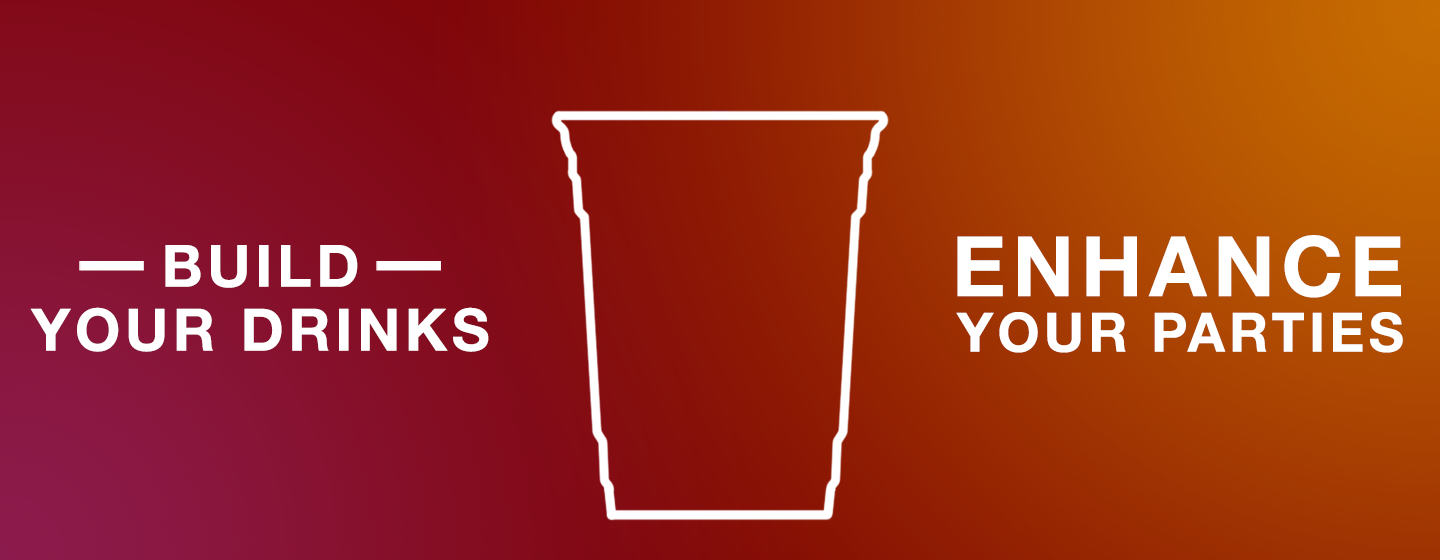
<style>
.page{position:relative;width:1440px;height:560px}
.page>*{position:absolute;margin:0}
.t1{font:58.3px/63.8px "HelveticaNeue-Bold";letter-spacing:0.08em;color:#ffffff}
.t2{font:54.2px/55.5px "HelveticaNeue-Bold";letter-spacing:0.08em;color:#ffffff}
.t3{font:83.3px/55.5px "HelveticaNeue-Bold";letter-spacing:0.08em;color:#ffffff}
</style>
<div class="page">
<p class="t1" style="left:30px;top:245px;width:459px;height:107px;text-align:center">BUILD<br>YOUR DRINKS</p>
<p class="t2" style="left:956px;top:235px;width:447px;height:118px;text-align:right"><span class="t3">ENHANCE<br></span>YOUR PARTIES</p>
</div>
